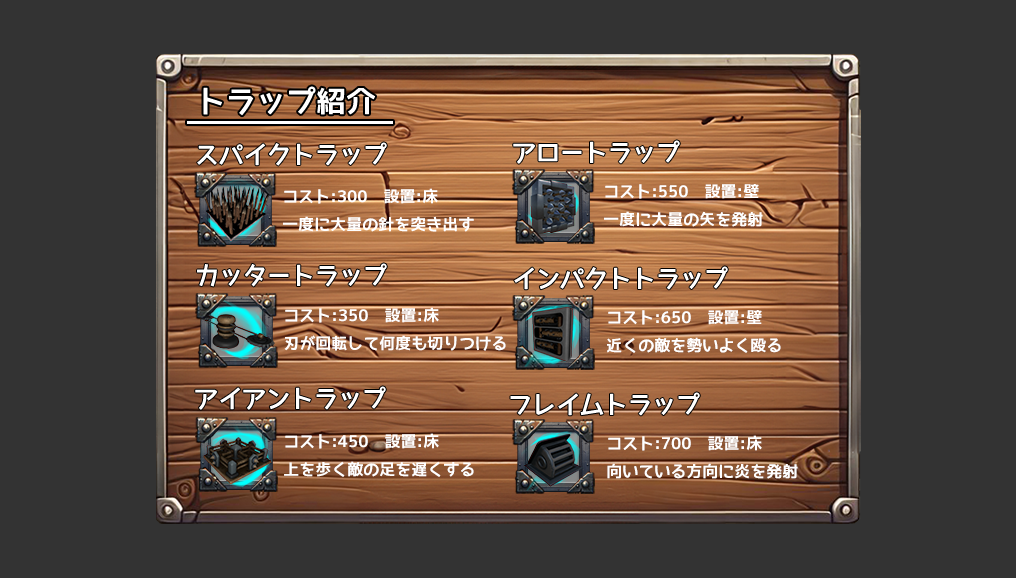
<style>
.page{position:relative;width:1016px;height:578px;background:#333333}
.page>*{position:absolute;margin:0}
.t1{font:30px "YasashisaGothicBoldV2-bold";color:#ffffff}
.t2{font:24px "YasashisaGothicBoldV2-bold";color:#ffffff}
.t3{font:16px "YasashisaGothicBoldV2-bold";color:#ffffff}
</style>
<div class="page">
<p class="t1" style="left:203px;top:86px;width:172px;height:30px">トラップ紹介</p>
<p class="t2" style="left:197px;top:142px;width:190px;height:24px">スパイクトラップ</p>
<p class="t2" style="left:513px;top:140px;width:167px;height:24px">アロートラップ</p>
<p class="t3" style="left:604px;top:184px;width:159px;height:43px">コスト:550　設置:壁<br>一度に大量の矢を発射</p>
<p class="t3" style="left:283px;top:188px;width:191px;height:44px">コスト:300　設置:床<br>一度に大量の針を突き出す</p>
<p class="t2" style="left:197px;top:263px;width:190px;height:24px">カッタートラップ</p>
<p class="t2" style="left:514px;top:266px;width:214px;height:24px">インパクトトラップ</p>
<p class="t3" style="left:284px;top:307px;width:222px;height:44px">コスト:350　設置:床<br>刃が回転して何度も切りつける</p>
<p class="t3" style="left:607px;top:310px;width:174px;height:43px">コスト:650　設置:壁<br>近くの敵を勢いよく殴る</p>
<p class="t2" style="left:195px;top:386px;width:191px;height:24px">アイアントラップ</p>
<p class="t2" style="left:510px;top:392px;width:190px;height:24px">フレイムトラップ</p>
<p class="t3" style="left:284px;top:433px;width:190px;height:44px">コスト:450　設置:床<br>上を歩く敵の足を遅くする</p>
<p class="t3" style="left:607px;top:435px;width:191px;height:44px">コスト:700　設置:床<br>向いている方向に炎を発射</p>
</div>
